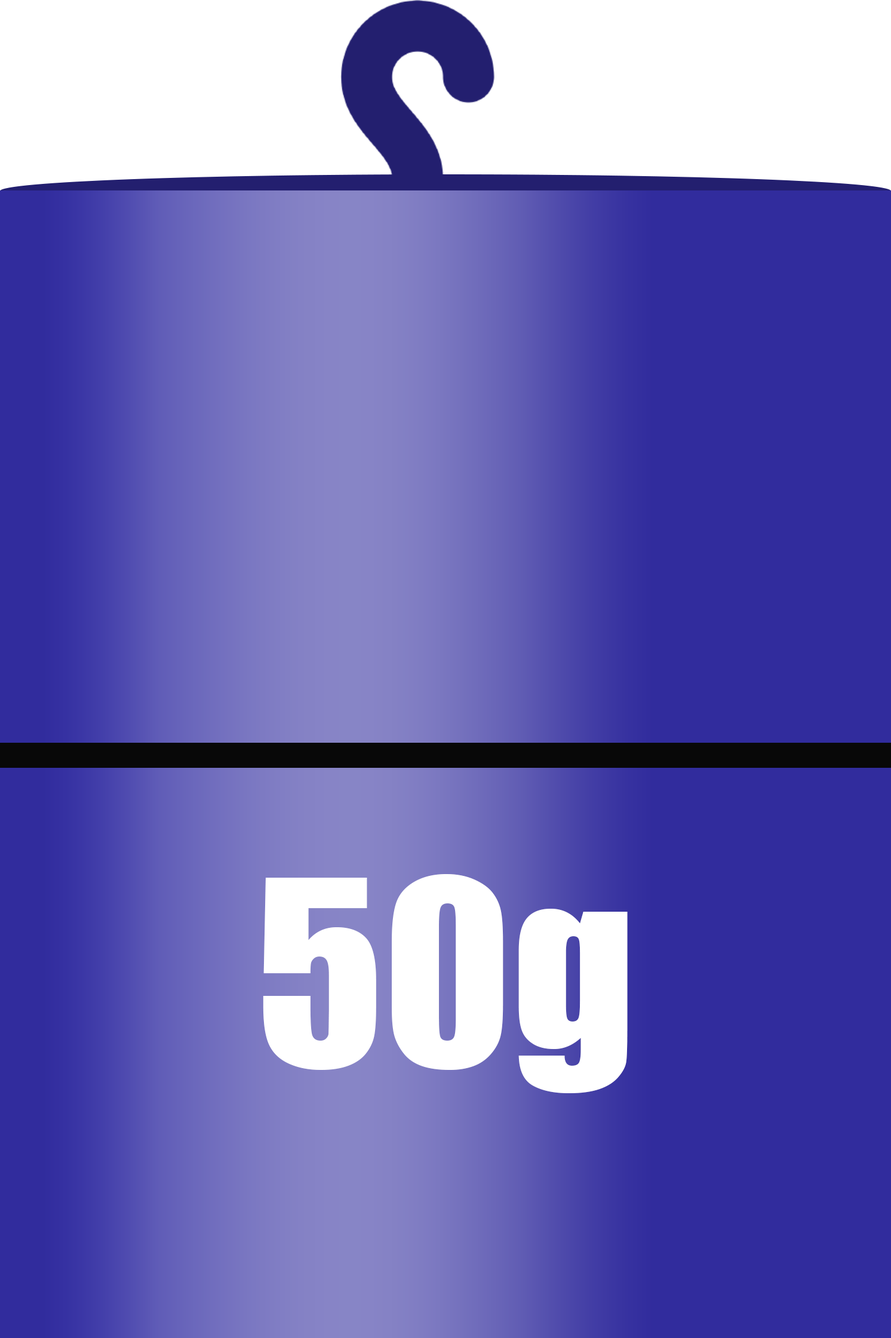
<style>
.page{position:relative;width:891px;height:1338px;background:#312c9d}
.page>*{position:absolute;margin:0}
.t1{font:238.9px "Impact";color:#ffffff}
</style>
<div class="page">
<p class="t1" style="left:263px;top:874px;width:365px;height:219px">50g</p>
</div>
